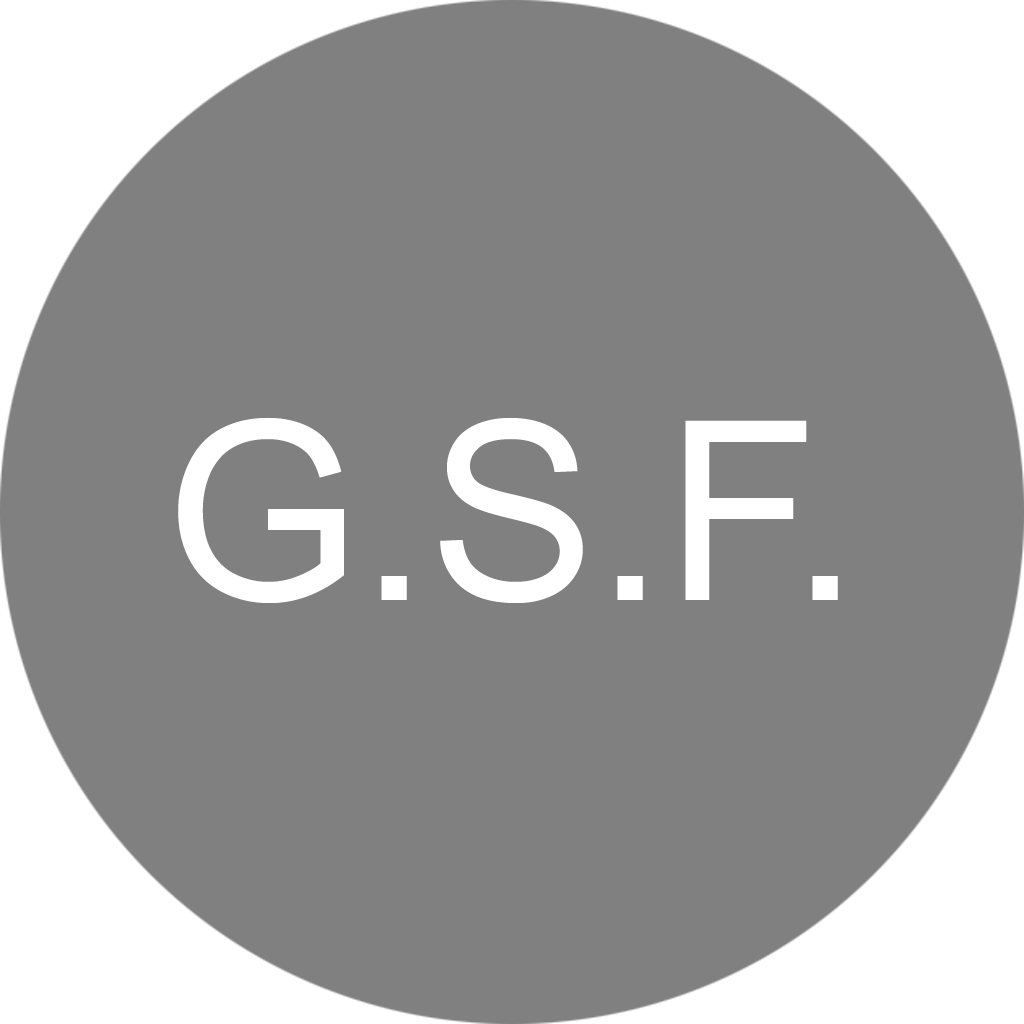
<style>
.page{position:relative;width:1024px;height:1024px;background:#808080}
.page>*{position:absolute;margin:0}
.t1{font:250px "ArialMT";color:#ffffff}
</style>
<div class="page">
<p class="t1" style="left:178px;top:417px;width:660px;height:186px">G.S.F.</p>
</div>
